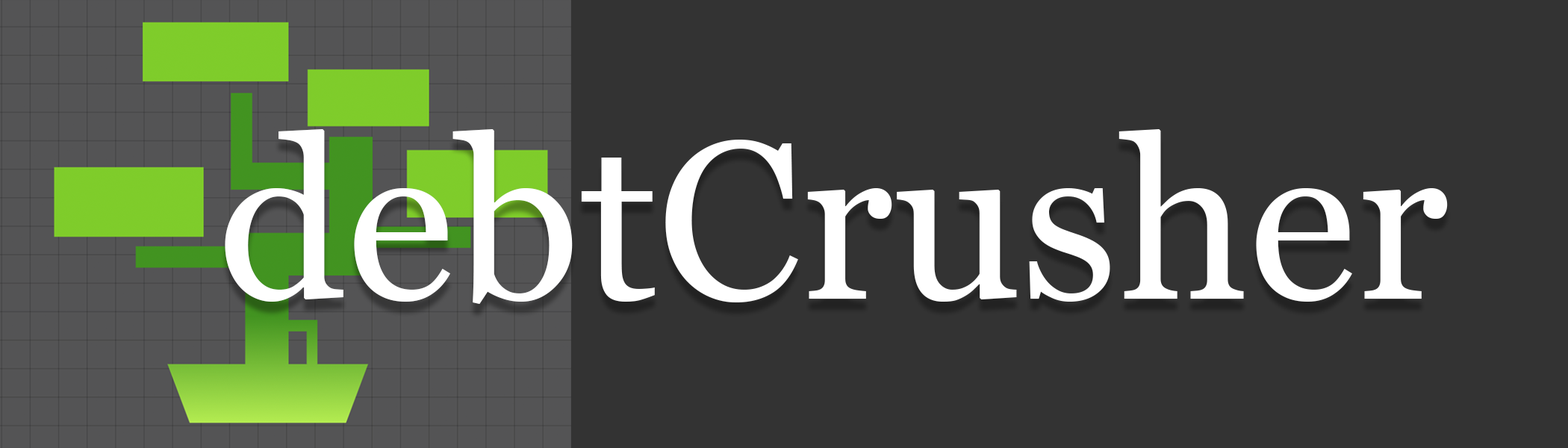
<style>
.page{position:relative;width:1568px;height:448px;background:#333333}
.page>*{position:absolute;margin:0}
.t1{font:224px "Georgia";color:#ffffff}
</style>
<div class="page">
<p class="t1" style="left:225px;top:129px;width:1223px;height:175px">debtCrusher</p>
</div>
